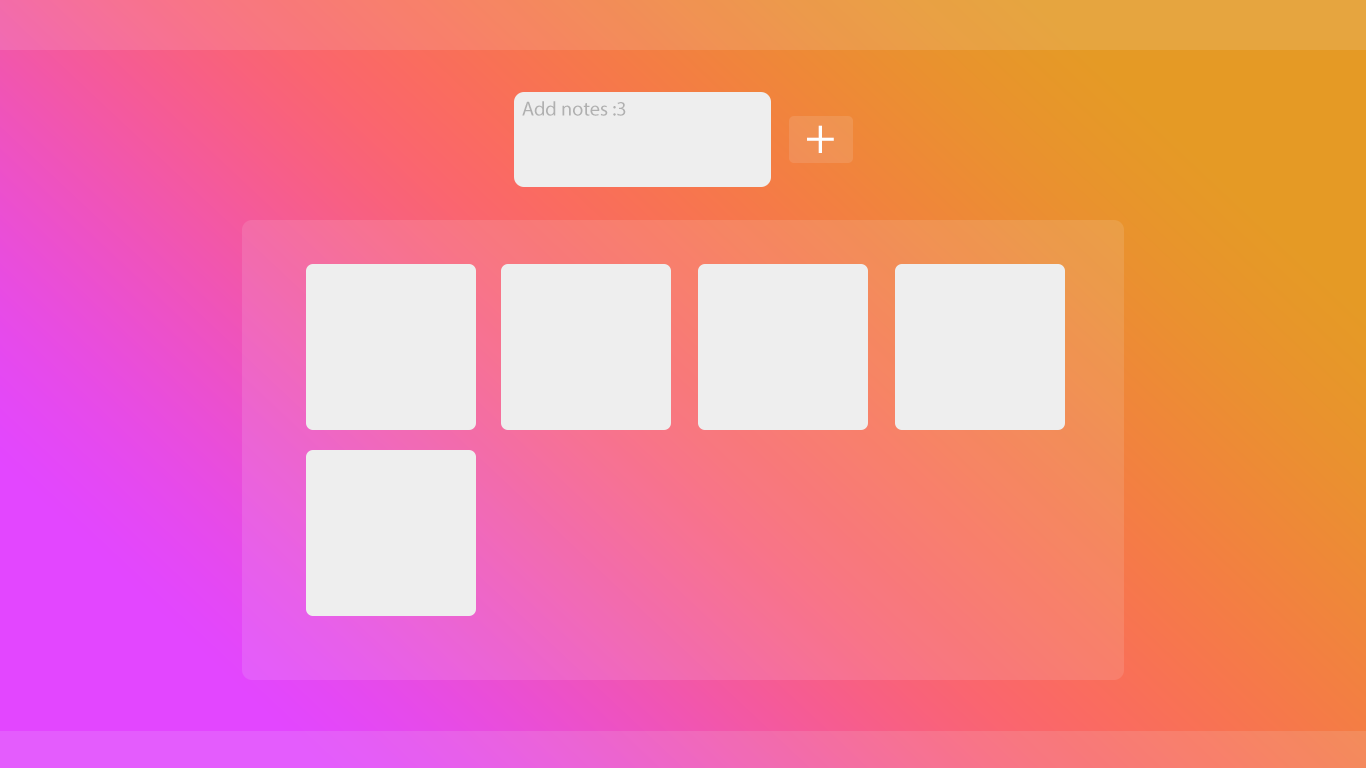
<style>
.page{position:relative;width:1366px;height:768px}
.page>*{position:absolute;margin:0}
.t1{font:20.2px "MyriadPro-Regular";color:#b0b0b0}
.t2{font:51.6px "MyriadPro-Regular";color:#ffffff}
</style>
<div class="page">
<p class="t1" style="left:522px;top:101px;width:104px;height:15px">Add notes :3</p>
<p class="t2" style="left:807px;top:125px;width:27px;height:28px">+</p>
</div>
